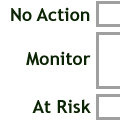
<style>
.page{position:relative;width:121px;height:122px;background:#ffffff}
.page>*{position:absolute;margin:0}
.t1{font:18px "TrebuchetMS-Bold";color:#0b2403}
</style>
<div class="page">
<p class="t1" style="left:11px;top:7px;width:79px;height:15px">No Action</p>
<p class="t1" style="left:26px;top:51px;width:65px;height:15px">Monitor</p>
<p class="t1" style="left:32px;top:99px;width:59px;height:14px">At Risk</p>
</div>
